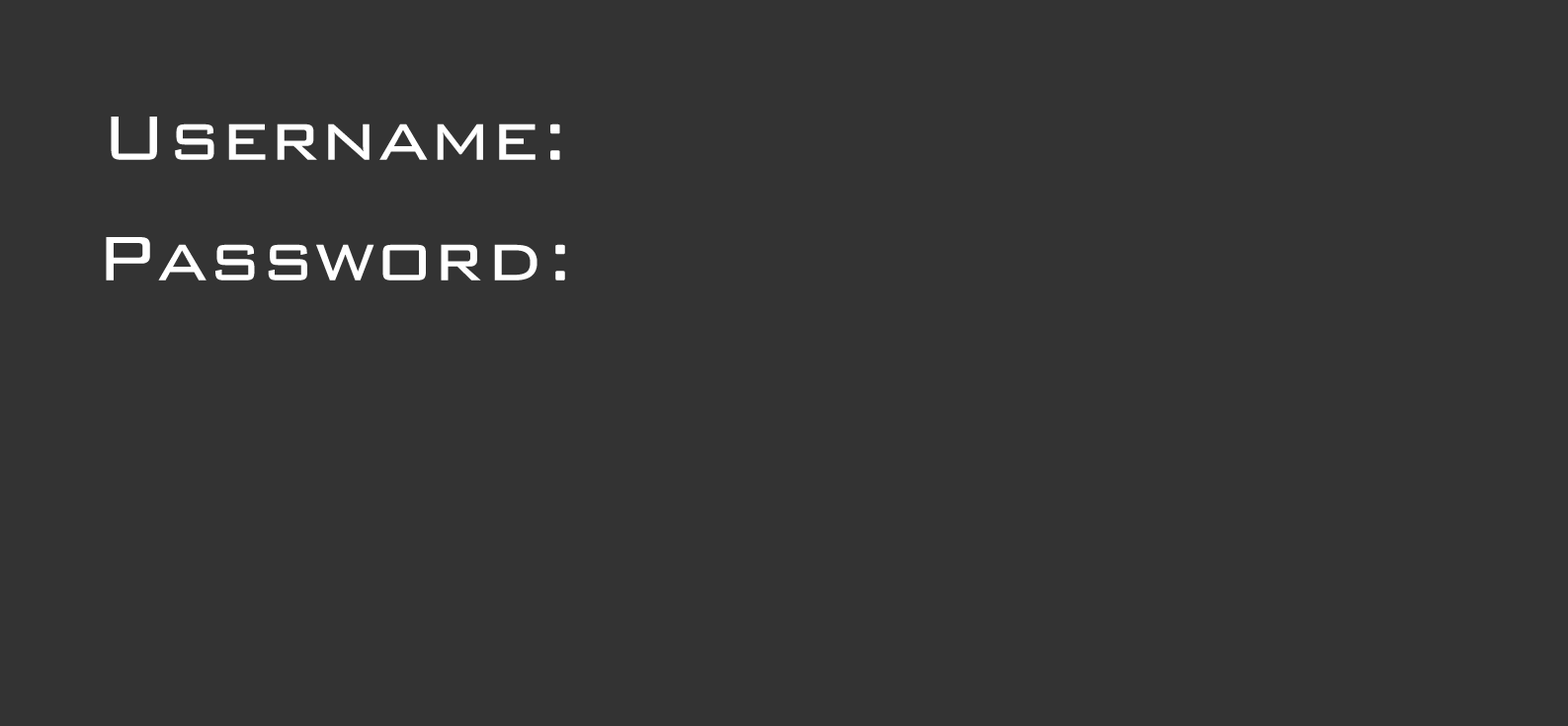
<style>
.page{position:relative;width:1568px;height:726px;background:#333333}
.page>*{position:absolute;margin:0}
.t1{font:83.2px "BankGothic-Light";color:#ffffff}
</style>
<div class="page">
<p class="t1" style="left:111px;top:117px;width:449px;height:43px">Username:</p>
<p class="t1" style="left:106px;top:237px;width:459px;height:44px">Password:</p>
</div>
